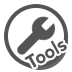
<style>
.page{position:relative;width:72px;height:72px;background:#ffffff}
.page>*{position:absolute;margin:0}
.t1{font:18.8px "MikadoMedium";color:#535453}
</style>
<div class="page">
<p class="t1" style="left:24px;top:40px;width:43px;height:28px;rotate:-30deg">Tools</p>
</div>
